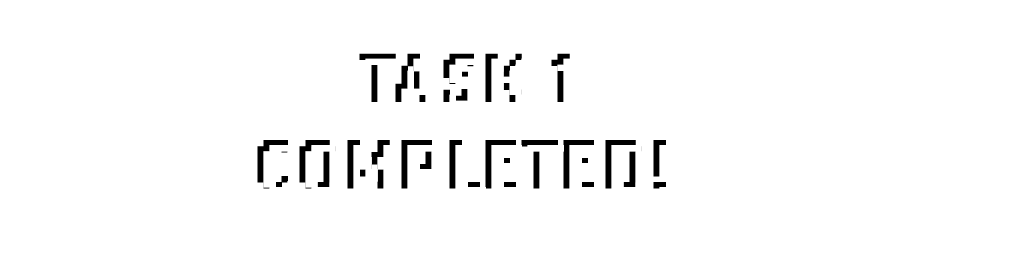
<style>
.page{position:relative;width:1024px;height:256px;background:#ffffff}
.page>*{position:absolute;margin:0}
.t1{font:72px "LoRes12OT-Bold"}
</style>
<div class="page">
<p class="t1" style="left:257px;top:53px;width:409px;height:136px;text-align:center">TASK 1<br>COMPLETED!</p>
</div>
